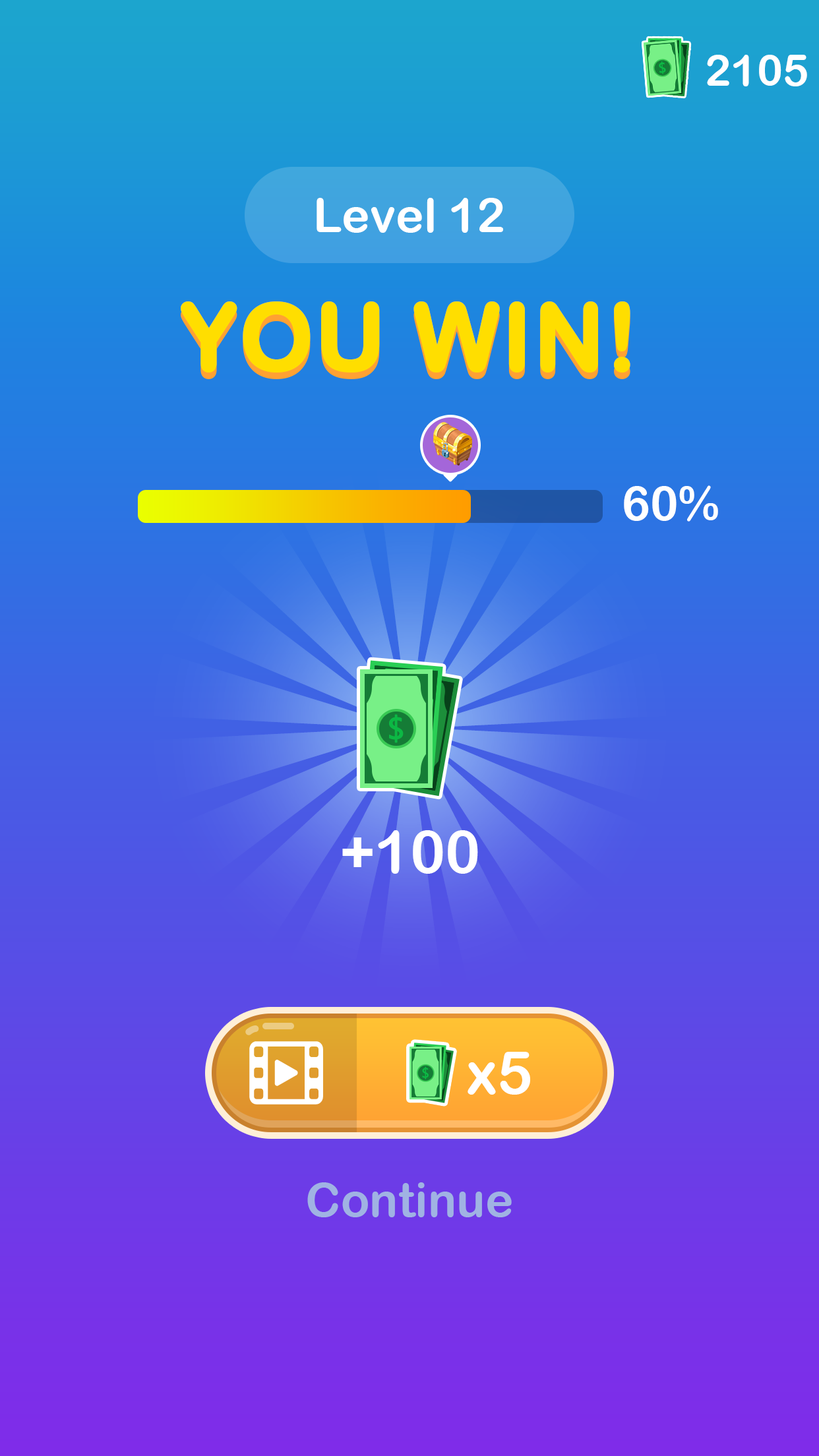
<style>
.page{position:relative;width:819px;height:1456px}
.page>*{position:absolute;margin:0}
.t1{font:43.5px "ArialRoundedMTBold";color:#ffffff}
.t2{font:47.5px "ArialRoundedMTBold";color:#ffffff}
.t3{font:92.3px "ArialRoundedMTBold";color:#ffde00;font-weight:bold}
.t4{font:59.3px "ArialRoundedMTBold";color:#ffffff}
.t5{font:47.5px "ArialRoundedMTBold";color:#a0b3e3}
</style>
<div class="page">
<p class="t1" style="left:707px;top:55px;width:100px;height:31px">2105</p>
<p class="t2" style="left:317px;top:198px;width:186px;height:35px">Level 12</p>
<p class="t3" style="left:181px;top:301px;width:449px;height:72px">YOU WIN!</p>
<p class="t2" style="left:624px;top:485px;width:94px;height:37px">60%</p>
<p class="t4" style="left:342px;top:830px;width:136px;height:44px">+100</p>
<p class="t4" style="left:468px;top:1052px;width:62px;height:43px">x5</p>
<p class="t5" style="left:307px;top:1182px;width:205px;height:35px">Continue</p>
</div>
